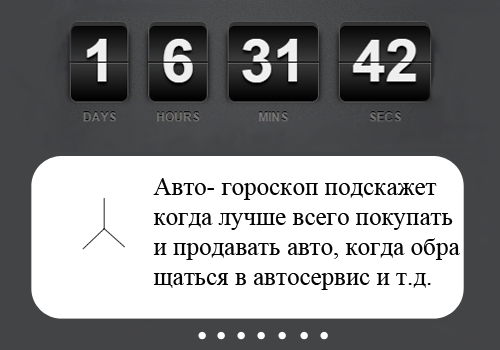
<style>
.page{position:relative;width:500px;height:350px;background:#ffffff}
.page>*{position:absolute;margin:0}
.t1{font:25px "TimesNewRomanPSMT";color:#040404}
.t2{font:25px/95.8px "TimesNewRomanPSMT";color:#040404}
</style>
<div class="page">
<p class="t1" style="left:153px;top:178px;width:307px;height:112px"><span class="t2">Авто- гороскоп подскажет</span><br>когда лучше всего покупать<br>и продавать авто, когда обра<br>щаться в автосервис и т.д.</p>
</div>
